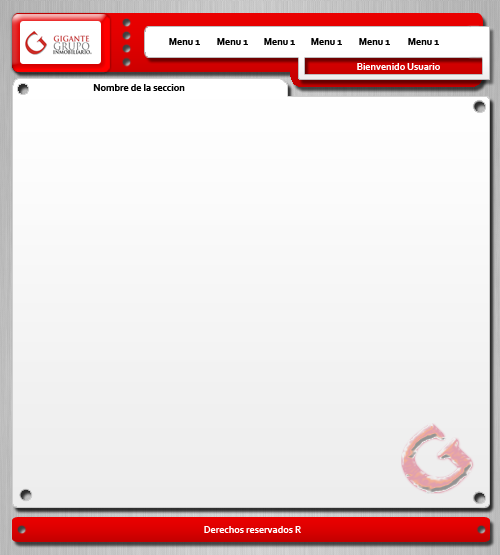
<style>
.page{position:relative;width:500px;height:555px}
.page>*{position:absolute;margin:0}
.t1{font:10px "Corbel-Bold";color:#000000}
.t2{font:10px "Corbel-Bold";color:#ffffff}
</style>
<div class="page">
<p class="t1" style="left:217px;top:38px;width:31px;height:7px">Menu 1</p>
<p class="t1" style="left:264px;top:38px;width:31px;height:7px">Menu 1</p>
<p class="t1" style="left:311px;top:38px;width:31px;height:7px">Menu 1</p>
<p class="t1" style="left:359px;top:38px;width:31px;height:7px">Menu 1</p>
<p class="t1" style="left:408px;top:38px;width:31px;height:7px">Menu 1</p>
<p class="t2" style="left:357px;top:63px;width:83px;height:7px">Bienvenido Usuario</p>
<p class="t1" style="left:93px;top:84px;width:92px;height:7px">Nombre de la seccion</p>
<p class="t2" style="left:204px;top:526px;width:97px;height:7px">Derechos reservados R</p>
</div>
